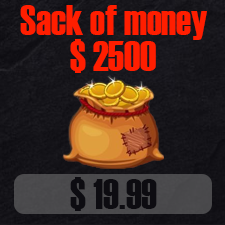
<style>
.page{position:relative;width:225px;height:225px}
.page>*{position:absolute;margin:0}
.t1{font:41.7px "Haettenschweiler";color:#ff1e00}
.t2{font:41.7px "Haettenschweiler";color:#0d0c11}
</style>
<div class="page">
<p class="t1" style="left:20px;top:5px;width:187px;height:35px">Sack of money</p>
<p class="t1" style="left:70px;top:39px;width:86px;height:34px">$ 2500</p>
<p class="t2" style="left:70px;top:177px;width:87px;height:34px">$ 19.99</p>
</div>
